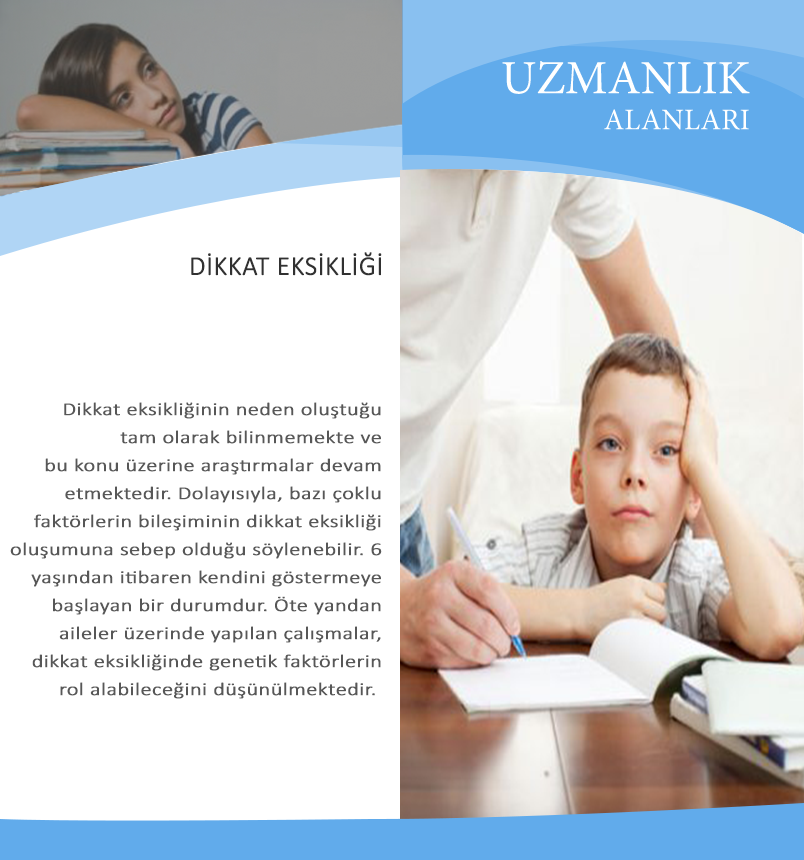
<style>
.page{position:relative;width:804px;height:860px;background:#ffffff}
.page>*{position:absolute;margin:0}
.t1{font:47.6px "MinionPro-Regular";color:#ffffff}
.t2{font:30px "MinionPro-Regular";color:#ffffff}
.t3{font:27px "Calibri-Light";color:#313131;font-weight:bold}
.t4{font:18.1px/28px "Calibri-Light";color:#575757;font-weight:bold;scale:1.22 1}
</style>
<div class="page">
<p class="t1" style="left:502px;top:61px;width:248px;height:69px;text-align:right">UZMANLIK<br><span class="t2"> ALANLARI</span></p>
<p class="t3" style="left:191px;top:252px;width:191px;height:24px">DİKKAT EKSİKLİĞİ</p>
<p class="t4" style="left:10px;top:402px;width:372px;height:297px;text-align:right">Dikkat eksikliğinin neden oluştuğu<br> tam olarak bilinmemekte ve<br> bu konu üzerine araştırmalar devam<br> etmektedir. Dolayısıyla, bazı çoklu<br> faktörlerin bileşiminin dikkat eksikliği<br> oluşumuna sebep olduğu söylenebilir. 6<br> yaşından itibaren kendini göstermeye<br> başlayan bir durumdur. Öte yandan<br> aileler üzerinde yapılan çalışmalar,<br> dikkat eksikliğinde genetik faktörlerin<br> rol alabileceğini düşünülmektedir.</p>
</div>
